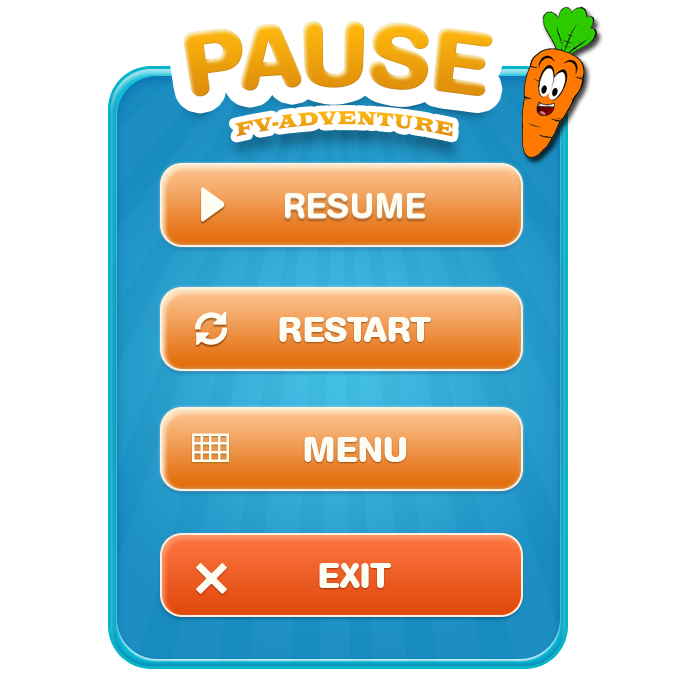
<style>
.page{position:relative;width:700px;height:700px;background:#ffffff}
.page>*{position:absolute;margin:0}
.t1{font:90px "AGBookRounded-Bold";color:#f8a900;text-transform:uppercase}
.t2{font:20.3px "LatinWide";color:#f3a80c;text-transform:uppercase;scale:0.68 1}
.t3{font:35px "AGBookRounded-Medium";color:#fdfdf3;text-transform:uppercase}
.t4{font:35px "AGBookRounded-Bold";color:#fdfdf3;text-transform:uppercase}
</style>
<div class="page">
<p class="t1" style="left:183px;top:20px;width:310px;height:77px">PAUSE</p>
<p class="t2" style="left:234px;top:111px;width:219px;height:26px">fv-adventure</p>
<p class="t3" style="left:285px;top:193px;width:141px;height:25px">RESUME</p>
<p class="t4" style="left:279px;top:317px;width:153px;height:25px">RESTART</p>
<p class="t4" style="left:304px;top:437px;width:103px;height:25px">MENU</p>
<p class="t4" style="left:319px;top:563px;width:73px;height:25px">EXIT</p>
</div>
